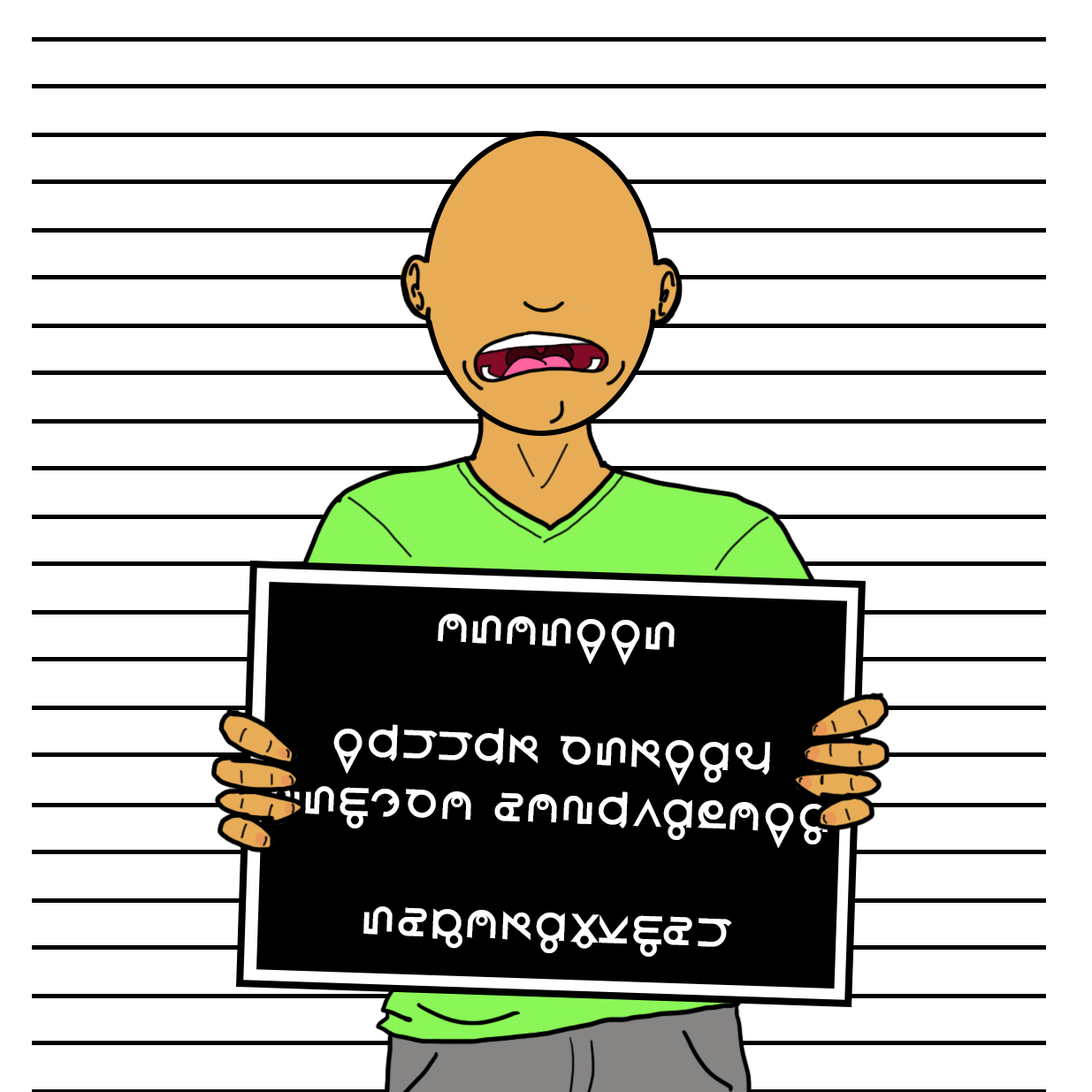
<style>
.page{position:relative;width:1092px;height:1092px;background:#ffffff}
.page>*{position:absolute;margin:0}
.t1{font:39.4px "RoswellWreckage";color:#ffffff}
</style>
<div class="page">
<p class="t1" style="left:271px;top:614px;width:557px;height:343px;text-align:center;rotate:2deg">eoeonno<br><br>nassau county<br>police department<br><br>odjeutzklds</p>
</div>
